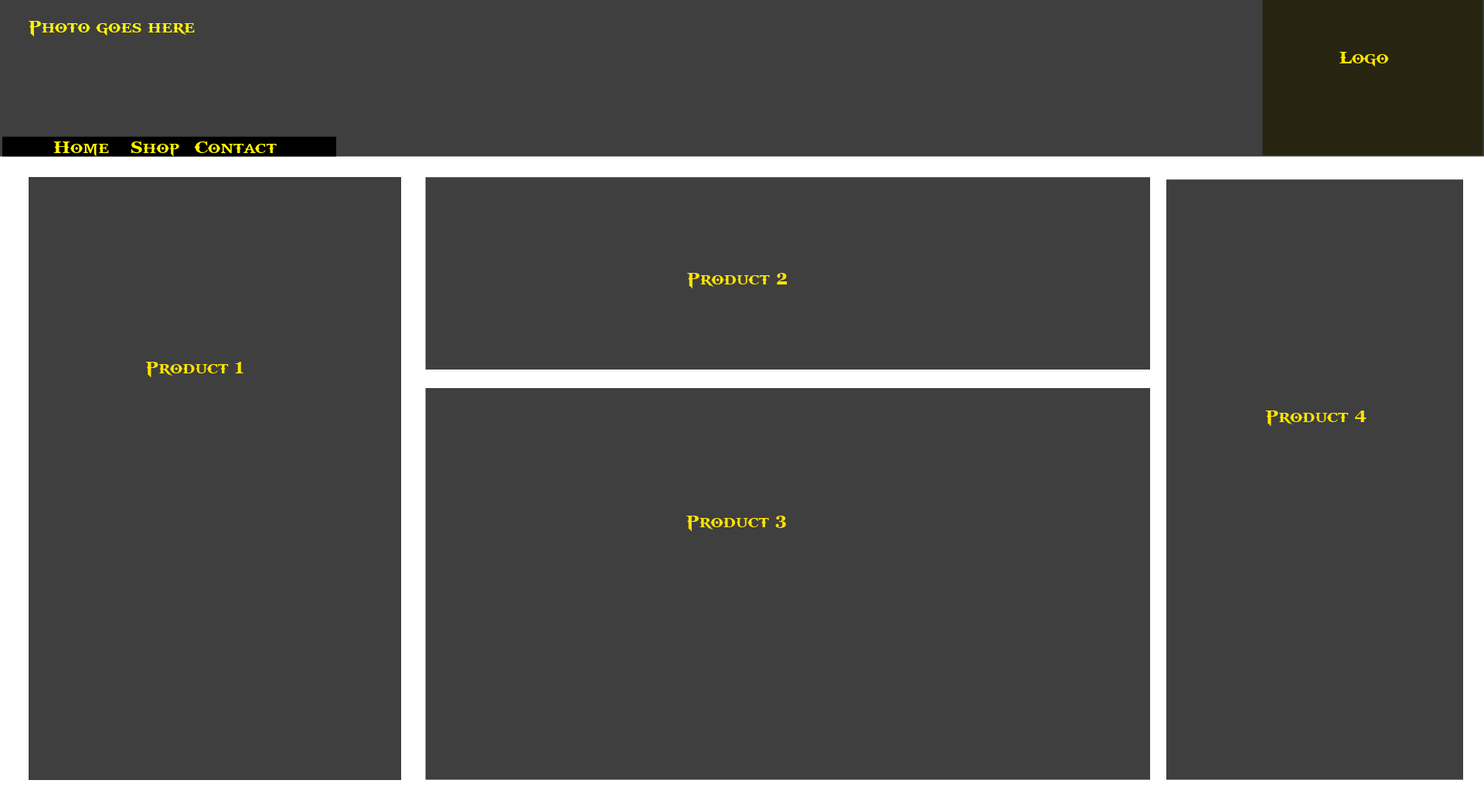
<style>
.page{position:relative;width:1484px;height:804px;background:#3f3f3f}
.page>*{position:absolute;margin:0}
.t1{font:18.5px "GodOfWar";color:#fff600}
.t2{font:18.5px "GodOfWar";color:#ffe400}
</style>
<div class="page">
<p class="t1" style="left:29px;top:21px;width:166px;height:15px">Photo goes here</p>
<p class="t2" style="left:1339px;top:52px;width:50px;height:14px">Logo</p>
<p class="t1" style="left:53px;top:141px;width:56px;height:15px">Home</p>
<p class="t1" style="left:131px;top:141px;width:48px;height:15px">Shop</p>
<p class="t1" style="left:194px;top:141px;width:83px;height:12px">Contact</p>
<p class="t2" style="left:687px;top:273px;width:100px;height:15px">Product 2</p>
<p class="t2" style="left:145px;top:362px;width:98px;height:15px">Product 1</p>
<p class="t2" style="left:1265px;top:410px;width:101px;height:16px">Product 4</p>
<p class="t2" style="left:686px;top:515px;width:100px;height:16px">Product 3</p>
</div>
